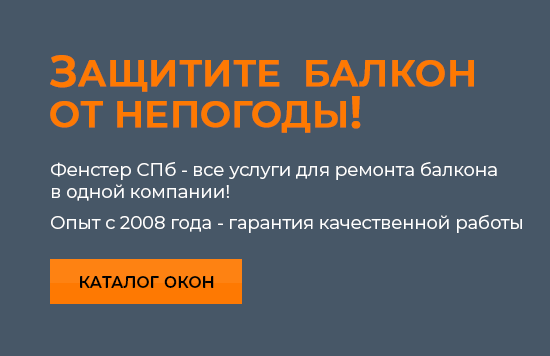
<style>
.page{position:relative;width:550px;height:356px;background:#475767}
.page>*{position:absolute;margin:0}
.t1{font:36px/41px "Montserrat-SemiBold";color:#fe7902;text-transform:uppercase;font-weight:bold}
.t2{font:43px/37px "Montserrat-SemiBold";color:#fe7902;text-transform:uppercase;font-weight:bold}
.t3{font:45px/41px "Montserrat-SemiBold";color:#fe7902;text-transform:uppercase;font-weight:bold}
.t4{font:18px "Montserrat-Regular";color:#ffffff}
.t5{font:16px "Montserrat-SemiBold";color:#000000;text-transform:uppercase}
</style>
<div class="page">
<p class="t1" style="left:50px;top:55px;width:424px;height:78px"><span class="t2">З</span>ащитите  балкон от непогоды<span class="t3">!</span></p>
<p class="t4" style="left:51px;top:162px;width:446px;height:39px">Фенстер СПб - все услуги для ремонта балкона<br>в одной компании!</p>
<p class="t4" style="left:51px;top:215px;width:471px;height:18px">Опыт с 2008 года - гарантия качественной работы</p>
<p class="t5" style="left:80px;top:276px;width:134px;height:12px">Каталог окон</p>
</div>
